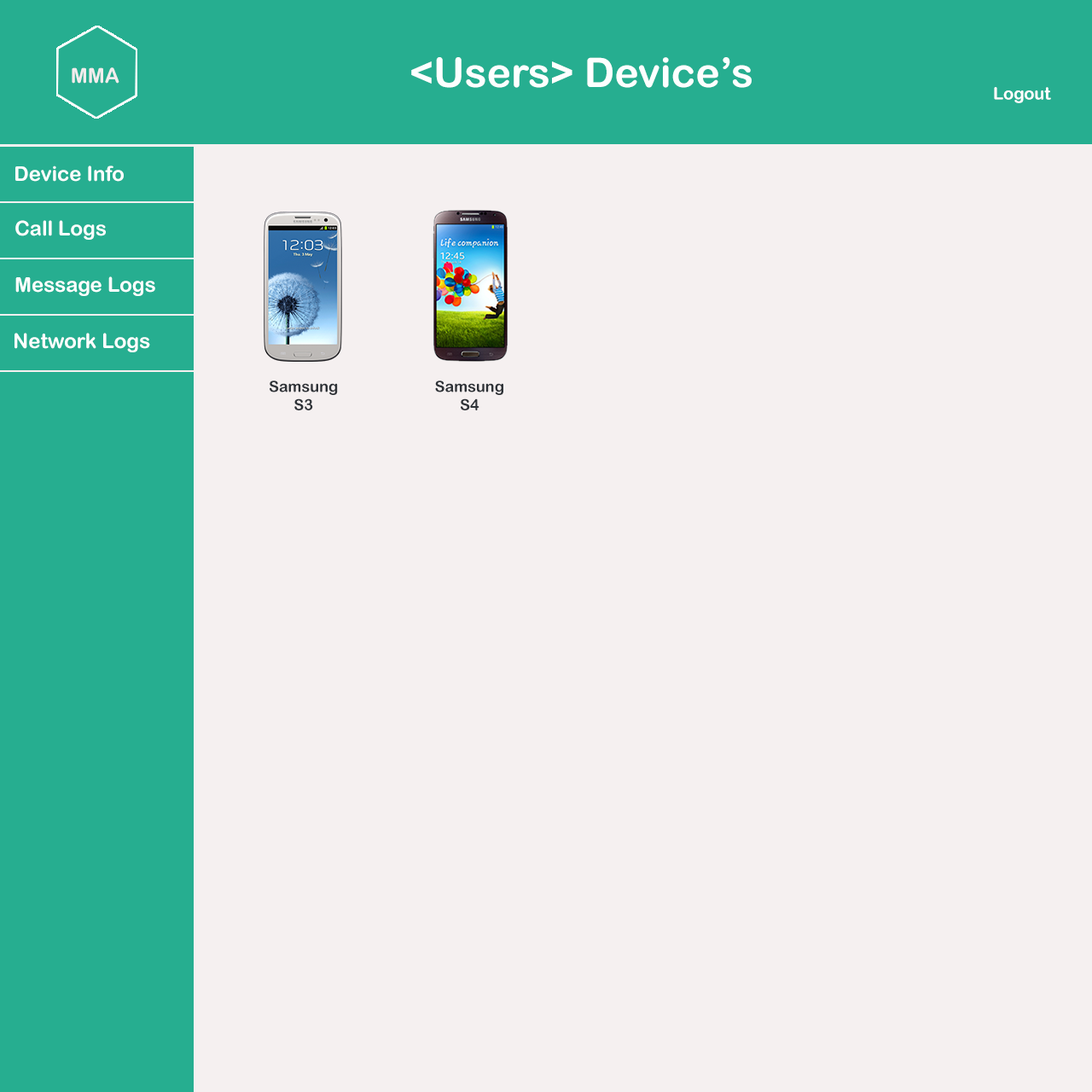
<style>
.page{position:relative;width:1092px;height:1092px;background:#f5f0f0}
.page>*{position:absolute;margin:0}
.t1{font:40.9px "ArialRoundedMTBold";color:#fcffff}
.t2{font:20.7px "ArialRoundedMTBold";color:#f2eded}
.t3{font:17.1px "ArialRoundedMTBold";color:#fefeff}
.t4{font:20.5px "ArialRoundedMTBold";color:#fcffff}
.t5{font:15.4px "ArialRoundedMTBold";color:#2e3237}
</style>
<div class="page">
<p class="t1" style="left:411px;top:57px;width:341px;height:31px">&lt;Users&gt; Device’s</p>
<p class="t2" style="left:72px;top:67px;width:47px;height:17px">MMA</p>
<p class="t3" style="left:994px;top:87px;width:57px;height:16px">Logout</p>
<p class="t4" style="left:15px;top:166px;width:109px;height:16px">Device Info</p>
<p class="t4" style="left:15px;top:220px;width:91px;height:20px">Call Logs</p>
<p class="t4" style="left:15px;top:276px;width:140px;height:20px">Message Logs</p>
<p class="t4" style="left:15px;top:333px;width:135px;height:19px">Network Logs</p>
<p class="t5" style="left:270px;top:380px;width:68px;height:30px;text-align:center">Samsung<br>S3</p>
<p class="t5" style="left:435px;top:380px;width:68px;height:30px;text-align:center">Samsung<br>S4</p>
</div>
